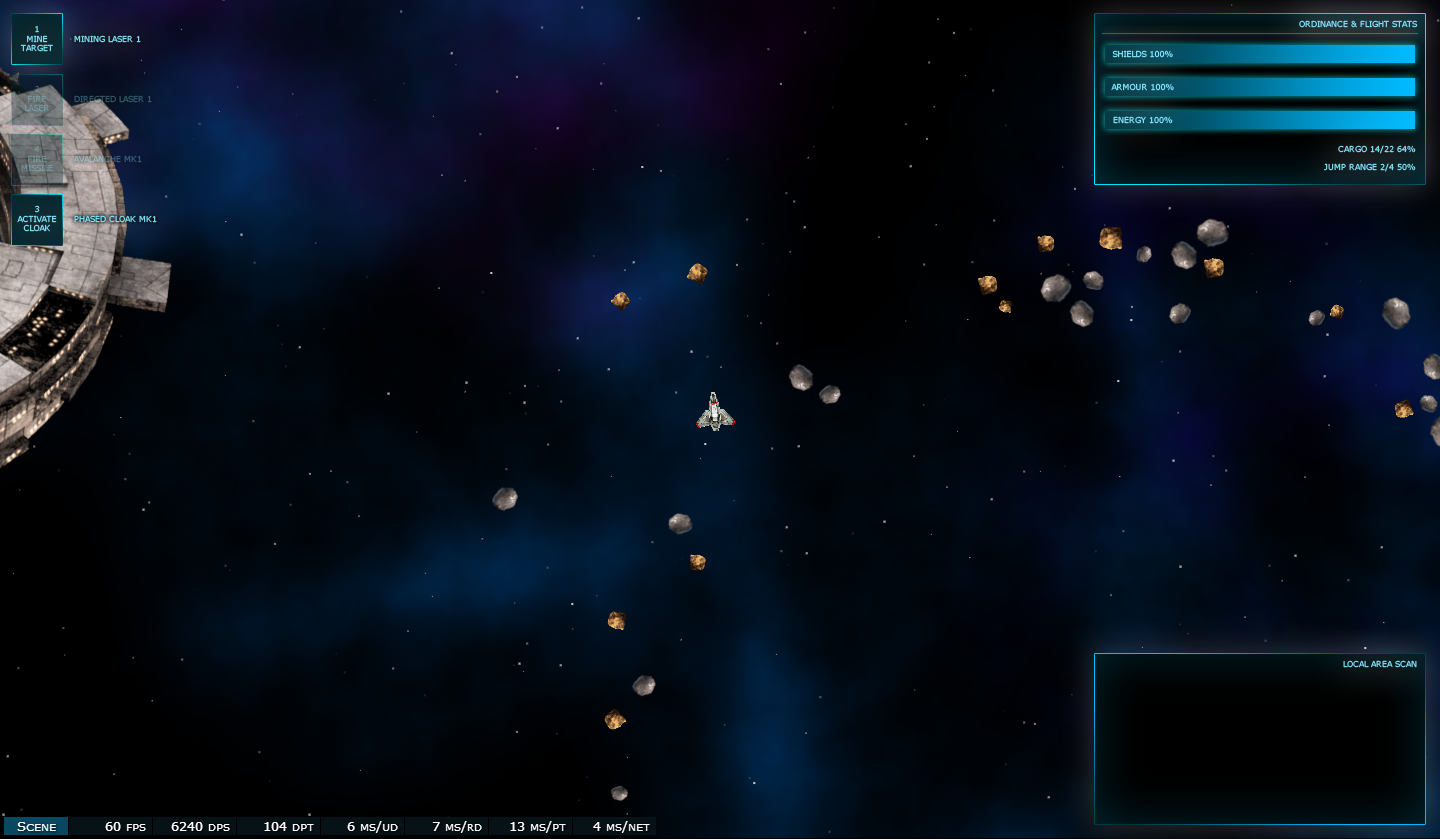
<style>
.page{position:relative;width:1440px;height:839px}
.page>*{position:absolute;margin:0}
.t1{font:8px "Verdana"}
.t2{font:8px "Verdana";color:#82e7ff}
.t3{font:8px "Verdana";color:#81e7ff}
.t4{font:8px "Verdana";color:#7a9ea7}
.t5{font:8px "Verdana";color:#70969e}
</style>
<div class="page">
<p class="t1" style="left:20px;top:25px;width:33px;height:27px;text-align:center">1<br>MINE<br>TARGET</p>
<p class="t2" style="left:1299px;top:20px;width:119px;height:8px">ORDINANCE &amp; FLIGHT STATS</p>
<p class="t3" style="left:74px;top:35px;width:67px;height:8px">MINING LASER 1</p>
<p class="t1" style="left:1112px;top:50px;width:61px;height:8px">SHIELDS 100%</p>
<p class="t4" style="left:25px;top:85px;width:24px;height:27px;text-align:center">2<br>FIRE<br>LASER</p>
<p class="t1" style="left:1111px;top:83px;width:63px;height:8px">ARMOUR 100%</p>
<p class="t1" style="left:74px;top:95px;width:78px;height:8px">DIRECTED LASER 1</p>
<p class="t2" style="left:1113px;top:116px;width:60px;height:8px">ENERGY 100%</p>
<p class="t5" style="left:21px;top:145px;width:32px;height:27px;text-align:center">4<br>FIRE<br>MISSILE</p>
<p class="t1" style="left:1338px;top:145px;width:78px;height:9px">CARGO 14/22 64%</p>
<p class="t1" style="left:74px;top:155px;width:68px;height:8px">AVALANCHE MK1</p>
<p class="t3" style="left:1324px;top:163px;width:92px;height:9px">JUMP RANGE 2/4 50%</p>
<p class="t1" style="left:17px;top:205px;width:40px;height:27px;text-align:center">3<br>ACTIVATE<br>CLOAK</p>
<p class="t3" style="left:74px;top:215px;width:83px;height:8px">PHASED CLOAK MK1</p>
<p class="t3" style="left:1343px;top:660px;width:74px;height:8px">LOCAL AREA SCAN</p>
</div>
